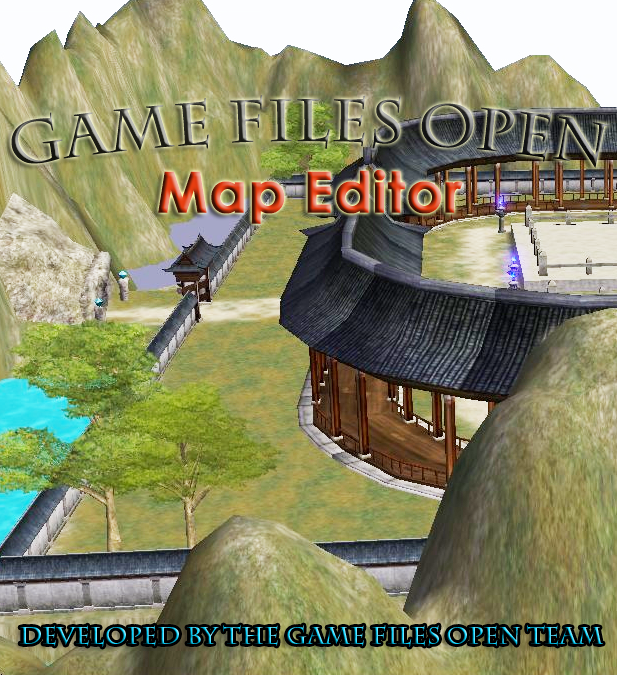
<style>
.page{position:relative;width:617px;height:675px}
.page>*{position:absolute;margin:0}
.t1{font:56px "CenturyGothic-Bold";font-weight:bold}
.t2{font:24px "CharlemagneStd-Bold"}
</style>
<div class="page">
<p class="t1" style="left:158px;top:170px;width:305px;height:54px">Map Editor</p>
<p class="t2" style="left:20px;top:625px;width:583px;height:22px">Developed By the game files open team</p>
</div>
